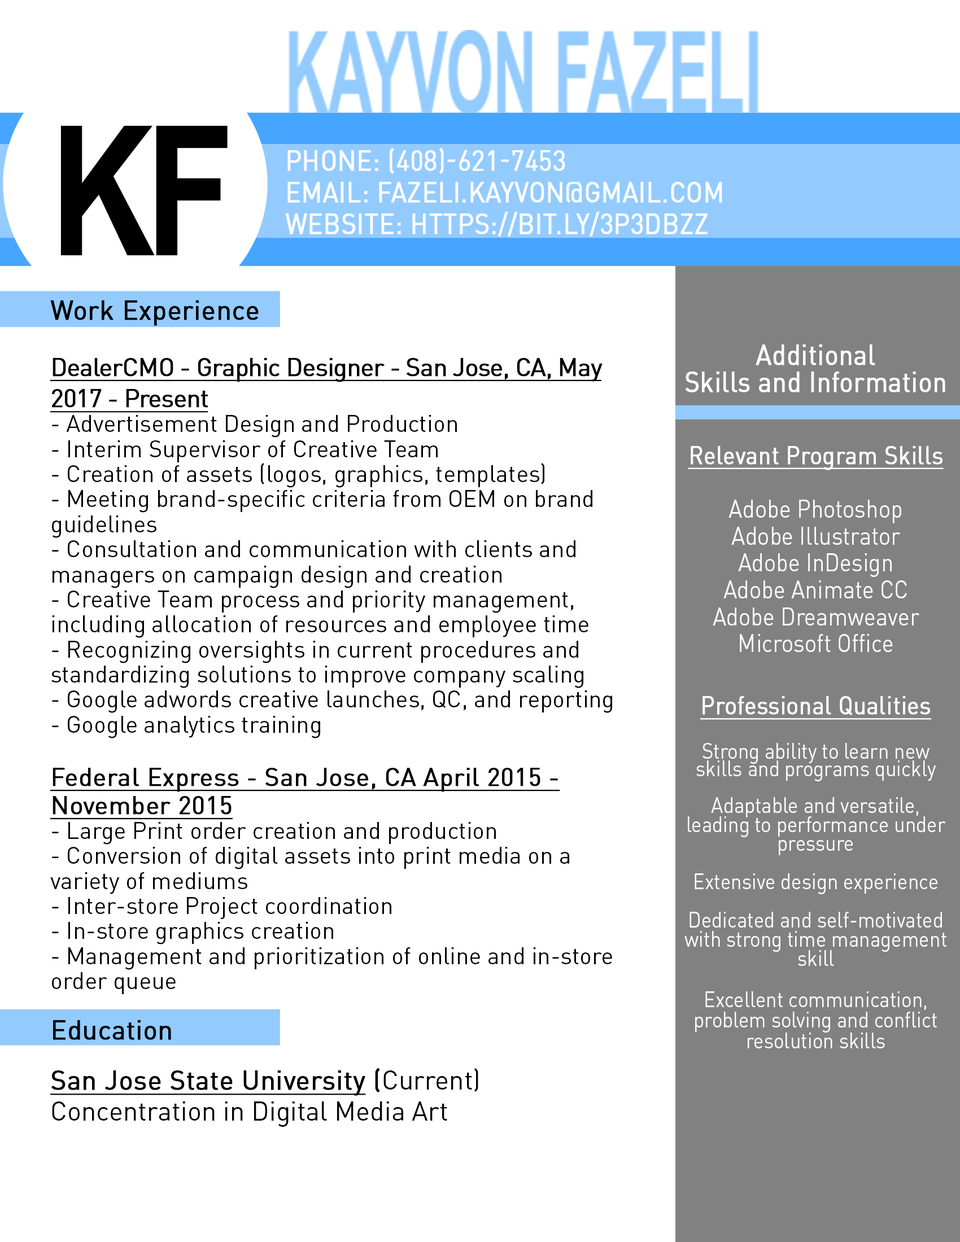
<style>
.page{position:relative;width:960px;height:1242px;background:#ffffff}
.page>*{position:absolute;margin:0}
.t1{font:180.4px "Arial-BoldMT";letter-spacing:-0.09em;color:#000000;font-weight:bold;scale:0.8 1}
.t2{font:28.2px/31.6px "DINPro-Regular";color:#ffffff;text-transform:uppercase;font-weight:bold;scale:0.9 1}
.t3{font:23.5px/25px "DINPro-Regular";color:#000000}
.t4{font:26.6px/25px "DINPro-Regular";color:#000000;font-weight:bold}
.t5{font:25px/31.3px "DINPro-Regular";letter-spacing:-0.04em;color:#000000;font-weight:bold;text-decoration:underline}
.t6{font:25px/28.2px "DINPro-Regular";color:#000000;font-weight:bold;text-decoration:underline}
.t7{font:26.6px/25px "DINPro-Regular";color:#000000;font-weight:bold;text-decoration:underline}
.t8{font:26.6px/25px "DINPro-Regular";color:#000000}
.t9{font:26.6px/31.3px "DINPro-Regular";color:#000000}
.t10{font:28.2px/26.9px "DINPro-Regular";color:#ffffff;font-weight:bold;scale:0.9 1}
.t11{font:25px/26.9px "DINPro-Regular";color:#ffffff;scale:0.9 1}
.t12{font:25px/26.9px "DINPro-Regular";color:#ffffff;font-weight:bold;text-decoration:underline;scale:0.9 1}
.t13{font:21.9px/19.1px "DINPro-Regular";color:#ffffff;scale:0.9 1}
.t14{font:21.9px/17.5px "DINPro-Regular";color:#ffffff;scale:0.9 1}
.t15{font:21.9px/20.7px "DINPro-Regular";color:#ffffff;scale:0.9 1}
</style>
<div class="page">
<p class="t1" style="left:60px;top:125px;width:168px;height:131px">KF</p>
<p class="t2" style="left:285px;top:148px;width:437px;height:89px">Phone: (408)-621-7453<br>Email: Fazeli.Kayvon@gmail.com<br>Website: https://bit.ly/3p3dbzZ</p>
<p class="t3" style="left:50px;top:300px;width:562px;height:827px"><span class="t4">Work Experience<br><br></span><span class="t5">DealerCMO - Graphic Designer - San Jose, CA, May 2017 - Present<br></span>- Advertisement Design and Production<br>- Interim Supervisor of Creative Team<br>- Creation of assets (logos, graphics, templates)<br>- Meeting brand-specific criteria from OEM on brand guidelines<br>- Consultation and communication with clients and managers on campaign design and creation<br>- Creative Team process and priority management, including allocation of resources and employee time<br>- Recognizing oversights in current procedures and standardizing solutions to improve company scaling <br>- Google adwords creative launches, QC, and reporting<br>- Google analytics training<br><br><span class="t6">Federal Express - San Jose, CA April 2015 - November 2015<br></span>- Large Print order creation and production<br>- Conversion of digital assets into print media on a variety of mediums<br>- Inter-store Project coordination<br>- In-store graphics creation<br>- Management and prioritization of online and in-store order queue<br><br><span class="t4">Education<br><br></span><span class="t7">San Jose State University</span><span class="t4"> (</span><span class="t8">Current)<br></span><span class="t9">Concentration in Digital Media Art</span></p>
<p class="t10" style="left:685px;top:344px;width:260px;height:48px;text-align:center">Additional<br>Skills and Information</p>
<p class="t11" style="left:688px;top:446px;width:256px;height:206px;text-align:center"><span class="t12">Relevant Program Skills<br><br></span>Adobe Photoshop <br>Adobe Illustrator<br>Adobe InDesign<br>Adobe Animate CC<br>Adobe Dreamweaver<br>Microsoft Office</p>
<p class="t13" style="left:684px;top:696px;width:262px;height:353px;text-align:center"><span class="t12">Professional Qualities<br><br></span><span class="t14">Strong ability to learn new skills and programs quickly<br><br></span>Adaptable and versatile, leading to performance under pressure<br><br>Extensive design experience<br><br>Dedicated and self-motivated with strong time management skill<span class="t15"><br><br>Excellent communication, problem solving and conflict resolution skills</span></p>
</div>
